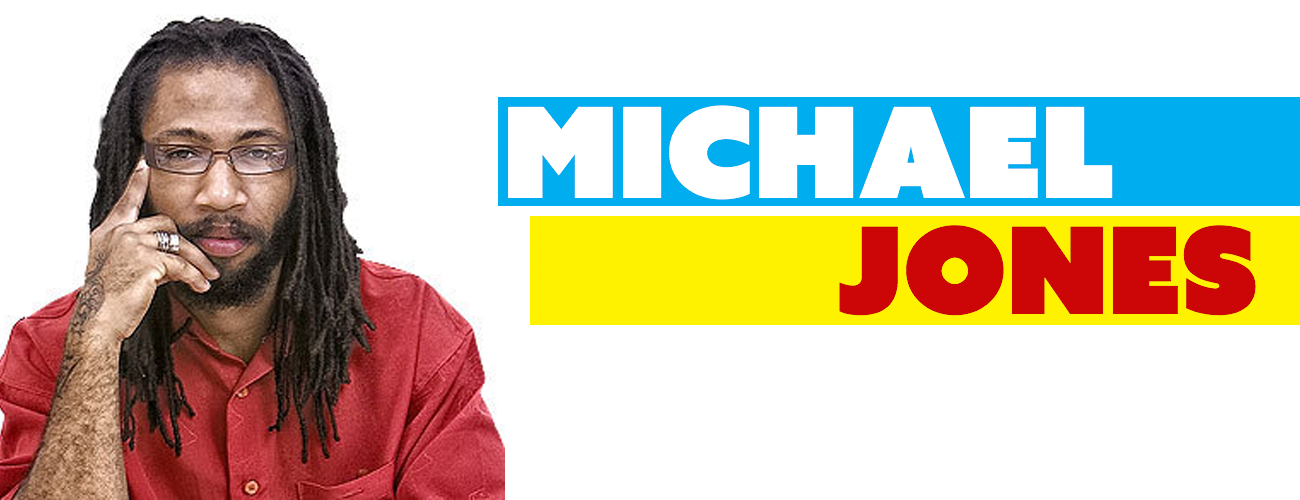
<style>
.page{position:relative;width:1300px;height:500px;background:#ffffff}
.page>*{position:absolute;margin:0}
.t1{font:125px "AzoSansUber-Regular";color:#ffffff}
.t2{font:120px "AzoSansUber-Regular";color:#cc0606}
</style>
<div class="page">
<p class="t1" style="left:508px;top:105px;width:605px;height:95px">Michael</p>
<p class="t2" style="left:839px;top:225px;width:417px;height:91px">Jones</p>
</div>
